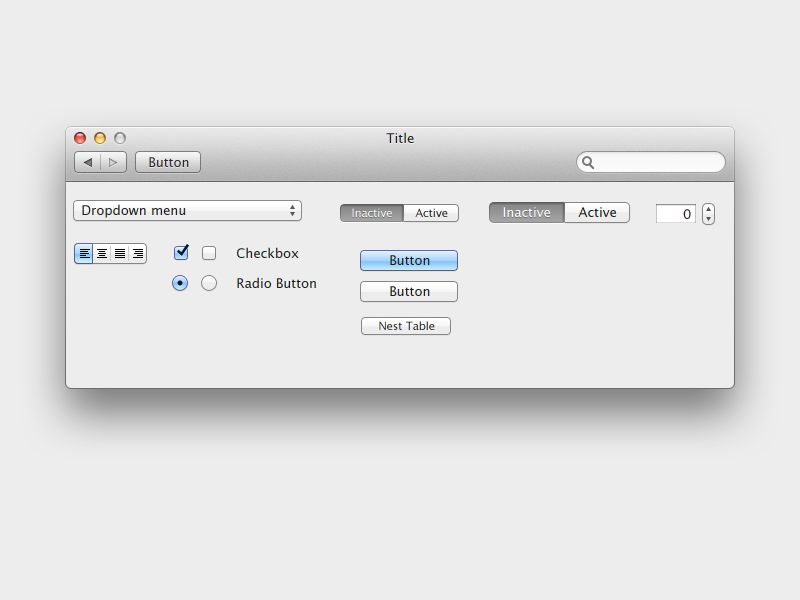
<style>
.page{position:relative;width:800px;height:600px;background:#ededed}
.page>*{position:absolute;margin:0}
.t1{font:13px "LucidaGrande"}
.t2{font:11px "LucidaGrande"}
.t3{font:11px "LucidaGrande";color:#deffe3}
.t4{font:11px "LucidaGrande";color:#7c441a}
.t5{font:11px "LucidaGrande";color:#1a528a}
.t6{font:13px "LucidaGrande";color:#844618}
.t7{font:10.9px "LucidaGrande";color:#8a521a}
.t8{font:10.9px "LucidaGrande"}
</style>
<div class="page">
<p class="t1" style="left:386px;top:132px;width:27px;height:11px">Title</p>
<p class="t1" style="left:386px;top:132px;width:28px;height:11px">Title</p>
<p class="t1" style="left:386px;top:132px;width:28px;height:11px">Title</p>
<p class="t1" style="left:149px;top:157px;width:39px;height:10px">Button</p>
<p class="t1" style="left:149px;top:157px;width:40px;height:10px">Button</p>
<p class="t1" style="left:149px;top:157px;width:40px;height:10px">Button</p>
<p class="t1" style="left:82px;top:204px;width:103px;height:14px">Dropdown menu</p>
<p class="t1" style="left:82px;top:204px;width:103px;height:14px">Dropdown menu</p>
<p class="t1" style="left:82px;top:204px;width:104px;height:14px">Dropdown menu</p>
<p class="t2" style="left:352px;top:208px;width:40px;height:9px">Inactive</p>
<p class="t3" style="left:352px;top:208px;width:40px;height:9px">Inactive</p>
<p class="t2" style="left:352px;top:208px;width:40px;height:9px">Inactive</p>
<p class="t4" style="left:415px;top:208px;width:32px;height:9px">Active</p>
<p class="t2" style="left:415px;top:208px;width:33px;height:9px">Active</p>
<p class="t5" style="left:415px;top:208px;width:33px;height:9px">Active</p>
<p class="t1" style="left:503px;top:207px;width:47px;height:10px">Inactive</p>
<p class="t1" style="left:503px;top:207px;width:47px;height:10px">Inactive</p>
<p class="t1" style="left:504px;top:207px;width:47px;height:10px">Inactive</p>
<p class="t1" style="left:578px;top:207px;width:38px;height:10px">Active</p>
<p class="t1" style="left:578px;top:207px;width:38px;height:10px">Active</p>
<p class="t1" style="left:578px;top:207px;width:39px;height:10px">Active</p>
<p class="t6" style="left:683px;top:209px;width:8px;height:10px">0</p>
<p class="t1" style="left:683px;top:209px;width:8px;height:10px">0</p>
<p class="t1" style="left:684px;top:209px;width:7px;height:10px">0</p>
<p class="t1" style="left:236px;top:247px;width:63px;height:11px">Checkbox</p>
<p class="t1" style="left:237px;top:247px;width:62px;height:11px">Checkbox</p>
<p class="t1" style="left:237px;top:247px;width:62px;height:11px">Checkbox</p>
<p class="t1" style="left:390px;top:255px;width:39px;height:10px">Button</p>
<p class="t1" style="left:390px;top:255px;width:40px;height:10px">Button</p>
<p class="t1" style="left:390px;top:255px;width:40px;height:10px">Button</p>
<p class="t1" style="left:237px;top:277px;width:79px;height:11px">Radio Button</p>
<p class="t1" style="left:237px;top:277px;width:79px;height:11px">Radio Button</p>
<p class="t1" style="left:237px;top:277px;width:79px;height:11px">Radio Button</p>
<p class="t1" style="left:390px;top:286px;width:39px;height:10px">Button</p>
<p class="t1" style="left:390px;top:286px;width:40px;height:10px">Button</p>
<p class="t1" style="left:390px;top:286px;width:40px;height:10px">Button</p>
<p class="t7" style="left:379px;top:321px;width:55px;height:9px">Nest Table</p>
<p class="t8" style="left:379px;top:321px;width:56px;height:9px">Nest Table</p>
<p class="t8" style="left:379px;top:321px;width:56px;height:9px">Nest Table</p>
</div>
